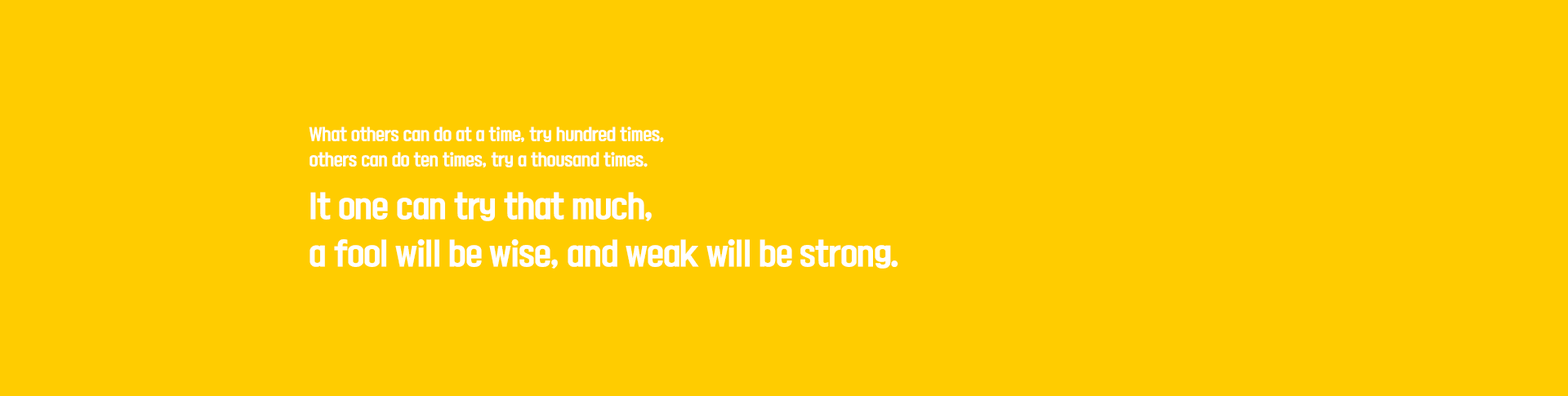
<style>
.page{position:relative;width:1568px;height:396px;background:#ffcc00}
.page>*{position:absolute;margin:0}
.t1{font:15.1px/25.2px "KoreanYNSJG5-R";letter-spacing:-0.025em;color:#ffffff}
.t2{font:28.8px/48px "KoreanYNSJG5-R";letter-spacing:-0.03em;color:#ffffff}
</style>
<div class="page">
<p class="t1" style="left:309px;top:127px;width:355px;height:40px">What others can do at a time, try hundred times,<br>others can do ten times, try a thousand times.</p>
<p class="t1" style="left:309px;top:127px;width:355px;height:40px">What others can do at a time, try hundred times,<br>others can do ten times, try a thousand times.</p>
<p class="t2" style="left:310px;top:192px;width:588px;height:77px">It one can try that much,<br>a fool will be wise, and weak will be strong.</p>
</div>
